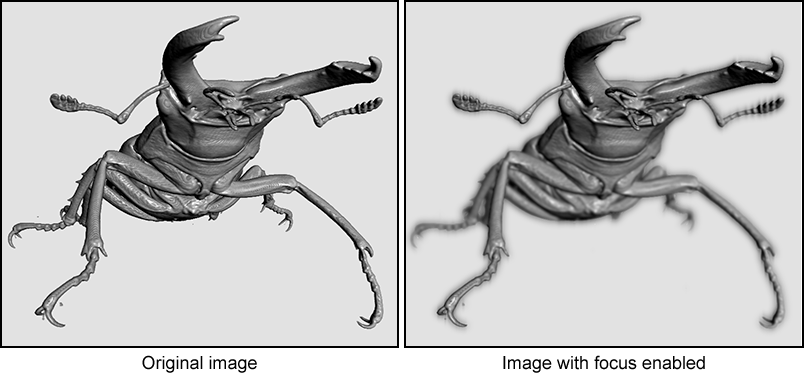
<style>
.page{position:relative;width:804px;height:380px;background:#e2e2e2}
.page>*{position:absolute;margin:0}
.t1{font:18px "ArialMT";color:#000000}
</style>
<div class="page">
<p class="t1" style="left:142px;top:355px;width:115px;height:18px">Original image</p>
<p class="t1" style="left:503px;top:355px;width:202px;height:18px">Image with focus enabled</p>
</div>
